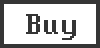
<style>
.page{position:relative;width:100px;height:48px;background:#ffffff}
.page>*{position:absolute;margin:0}
.t1{font:32px "PerfectDOSVGA437Win";color:#353535}
</style>
<div class="page">
<p class="t1" style="left:26px;top:14px;width:50px;height:26px">Buy</p>
</div>
